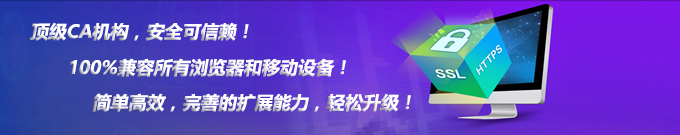
<style>
.page{position:relative;width:680px;height:135px}
.page>*{position:absolute;margin:0}
.t1{font:18px "MicrosoftYaHei-Bold";color:#ffffff;font-style:italic}
</style>
<div class="page">
<p class="t1" style="left:30px;top:22px;width:219px;height:19px">顶级CA机构，安全可信赖！</p>
<p class="t1" style="left:70px;top:58px;width:276px;height:19px">100%兼容所有浏览器和移动设备！</p>
<p class="t1" style="left:92px;top:93px;width:319px;height:19px">简单高效，完善的扩展能力，轻松升级！</p>
</div>
